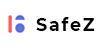
<style>
.page{position:relative;width:100px;height:49px;background:#ffffff}
.page>*{position:absolute;margin:0}
.t1{font:17.8px "Montserrat-Bold";letter-spacing:0.1em;color:#030303}
</style>
<div class="page">
<p class="t1" style="left:36px;top:17px;width:59px;height:14px">SafeZ</p>
</div>
